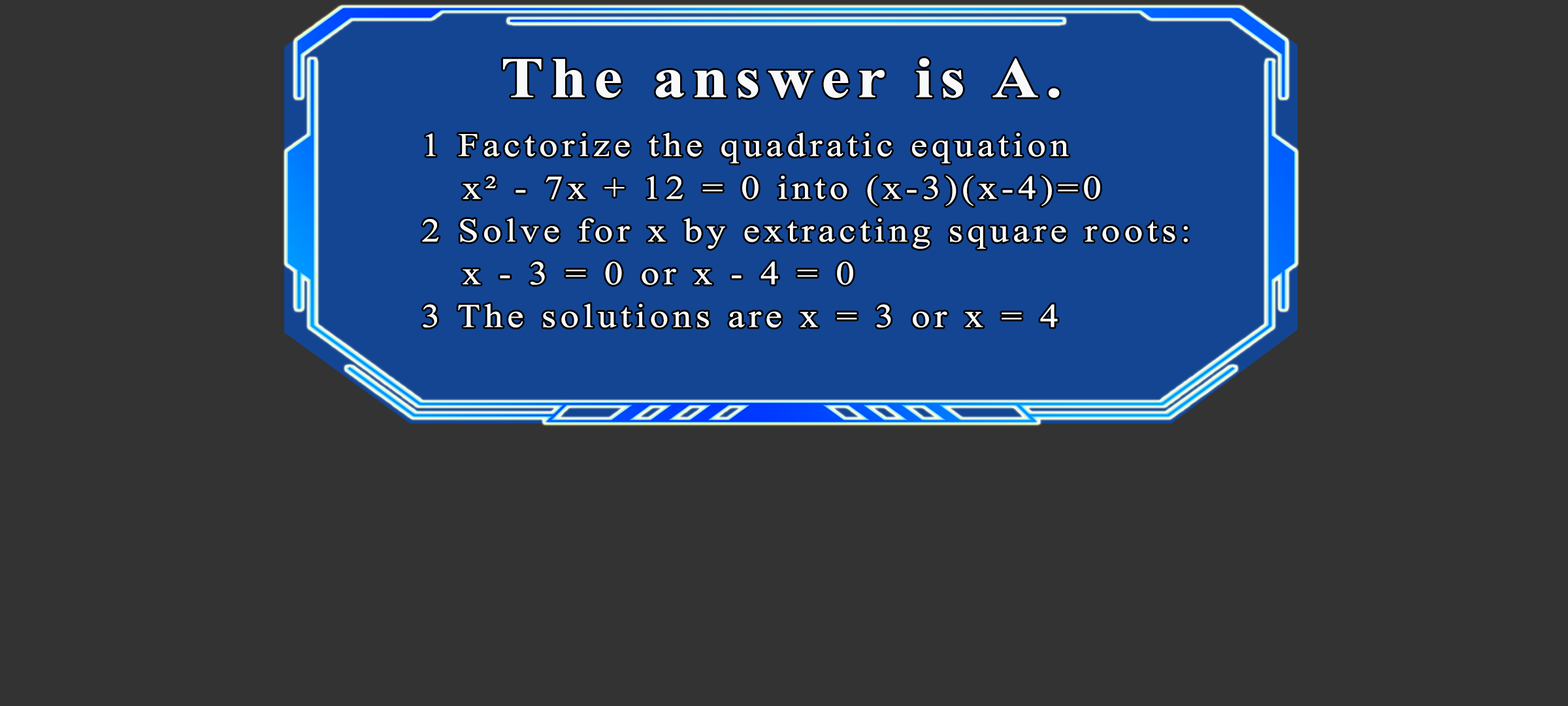
<style>
.page{position:relative;width:1568px;height:706px;background:#333333}
.page>*{position:absolute;margin:0}
.t1{font:57.2px "TimesNewRomanPS-BoldMT";letter-spacing:0.115em;color:#f7f9fb;scale:1.12 1}
.t2{font:33.2px/42.7px "TimesNewRomanPSMT";letter-spacing:0.115em;color:#f7f9fb;scale:1.12 1}
</style>
<div class="page">
<p class="t1" style="left:503px;top:58px;width:557px;height:40px">The answer is A.</p>
<p class="t2" style="left:422px;top:133px;width:766px;height:194px">1 Factorize the quadratic equation<br>  x² - 7x + 12 = 0 into (x-3)(x-4)=0<br>2 Solve for x by extracting square roots:<br>   x - 3 = 0 or x - 4 = 0<br>3 The solutions are x = 3 or x = 4</p>
</div>
